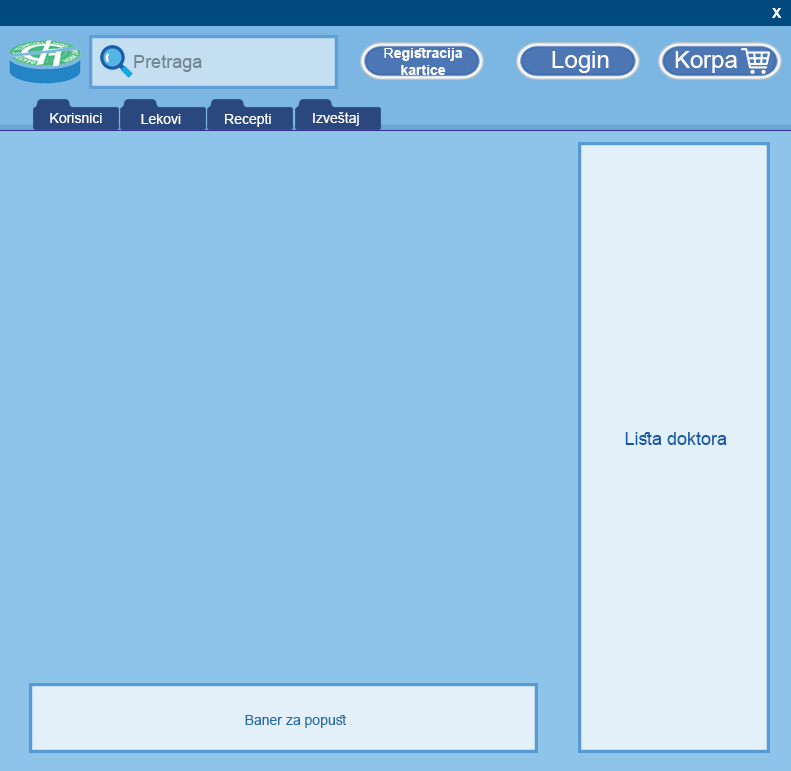
<style>
.page{position:relative;width:791px;height:771px;background:#8ec4ea}
.page>*{position:absolute;margin:0}
.t1{font:14px "Arial-BoldMT";color:#ffffff}
.t2{font:14px "ArialMT";color:#ffffff}
.t3{font:24px "ArialMT";color:#ffffff}
.t4{font:18px "ArialMT";color:#758692}
.t5{font:18px "ArialMT";color:#1459a7}
.t6{font:14px "ArialMT";color:#216ba4}
</style>
<div class="page">
<p class="t1" style="left:772px;top:8px;width:10px;height:10px">X</p>
<p class="t1" style="left:384px;top:48px;width:78px;height:27px;text-align:center"><span class="t2">R</span>egistracija<br>kartice</p>
<p class="t3" style="left:552px;top:51px;width:57px;height:22px">Login</p>
<p class="t3" style="left:675px;top:51px;width:62px;height:22px">Korpa</p>
<p class="t4" style="left:134px;top:55px;width:68px;height:17px">Pretraga</p>
<p class="t2" style="left:50px;top:113px;width:52px;height:10px">Korisnici</p>
<p class="t2" style="left:225px;top:113px;width:46px;height:14px">Recepti</p>
<p class="t2" style="left:313px;top:112px;width:46px;height:14px">Izveštaj</p>
<p class="t2" style="left:141px;top:114px;width:40px;height:10px">Lekovi</p>
<p class="t5" style="left:625px;top:432px;width:102px;height:13px">Lista doktora</p>
<p class="t6" style="left:245px;top:715px;width:102px;height:13px">Baner za popust</p>
</div>
